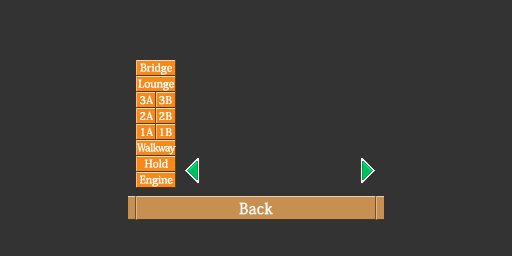
<style>
.page{position:relative;width:512px;height:256px;background:#333333}
.page>*{position:absolute;margin:0}
.t1{font:10.7px/16px "KozMinPro-Medium";letter-spacing:0.01em;color:#ffffff}
.t2{font:10.7px/16px "KozMinPro-Medium";color:#ffffff}
.t3{font:10.7px/16px "KozMinPro-Medium";letter-spacing:-0.1em;color:#ffffff;scale:0.8 1}
.t4{font:10.7px/16px "KozMinPro-Medium";letter-spacing:-0.025em;color:#ffffff}
.t5{font:10.7px/16px "KozMinPro-Medium";letter-spacing:-0.075em;color:#ffffff}
.t6{font:10.7px/16px "KozMinPro-Medium";letter-spacing:-0.075em;color:#ffffff;scale:0.9 1}
.t7{font:10.7px/16px "KozMinPro-Medium";letter-spacing:0.025em;color:#ffffff}
</style>
<div class="page">
<p class="t1" style="left:137px;top:63px;width:39px;height:124px;text-align:center">Bridge<br><span class="t2">Lounge<br><br><br><br></span><span class="t3">W</span><span class="t4">al</span><span class="t5">k</span><span class="t6">w</span><span class="t5">ay<br></span>Hold<br><span class="t2">Engine</span></p>
<p class="t7" style="left:140px;top:95px;width:13px;height:41px;text-align:center">3A<br>2A<br>1A</p>
<p class="t7" style="left:159px;top:96px;width:13px;height:40px;text-align:center">3B<br>2B<br>1B</p>
</div>
